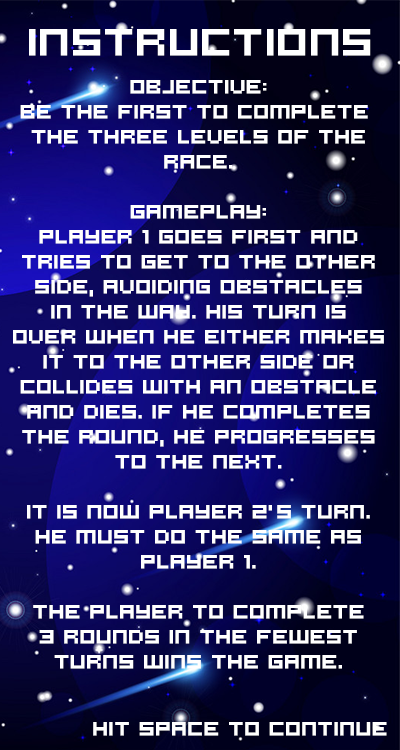
<style>
.page{position:relative;width:400px;height:750px}
.page>*{position:absolute;margin:0}
.t1{font:41.7px "Hooge0553";color:#ffffff;font-weight:bold}
.t2{font:20.8px/25px "Hooge0553";color:#ffffff;font-weight:bold}
.t3{font:20.8px "Hooge0553";color:#ffffff;font-weight:bold}
</style>
<div class="page">
<p class="t1" style="left:29px;top:29px;width:342px;height:27px">Instructions</p>
<p class="t2" style="left:13px;top:80px;width:371px;height:589px;text-align:center">objective:<br>be the first to complete <br>the three levels of the<br>race.<br><br>gameplay:<br>player 1 goes first and<br>tries to get to the other<br>side, avoiding obstacles<br>in the way. his turn is<br>over when he either makes<br>it to the other side or<br>collides with an obstacle<br>and dies. If he completes<br>the round, he progresses<br>to the next.<br><br>It is now player 2’s turn.<br>He must do the same as<br>player 1.<br><br>the player to complete<br>3 rounds in the fewest<br>turns wins the game.</p>
<p class="t3" style="left:93px;top:722px;width:294px;height:14px">hit space to continue</p>
</div>
